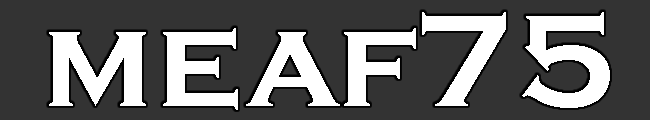
<style>
.page{position:relative;width:650px;height:120px;background:#333333}
.page>*{position:absolute;margin:0}
.t1{font:135.3px "CopperplateGothic-Bold";color:#ffffff}
</style>
<div class="page">
<p class="t1" style="left:49px;top:12px;width:561px;height:98px">meaf75</p>
</div>
